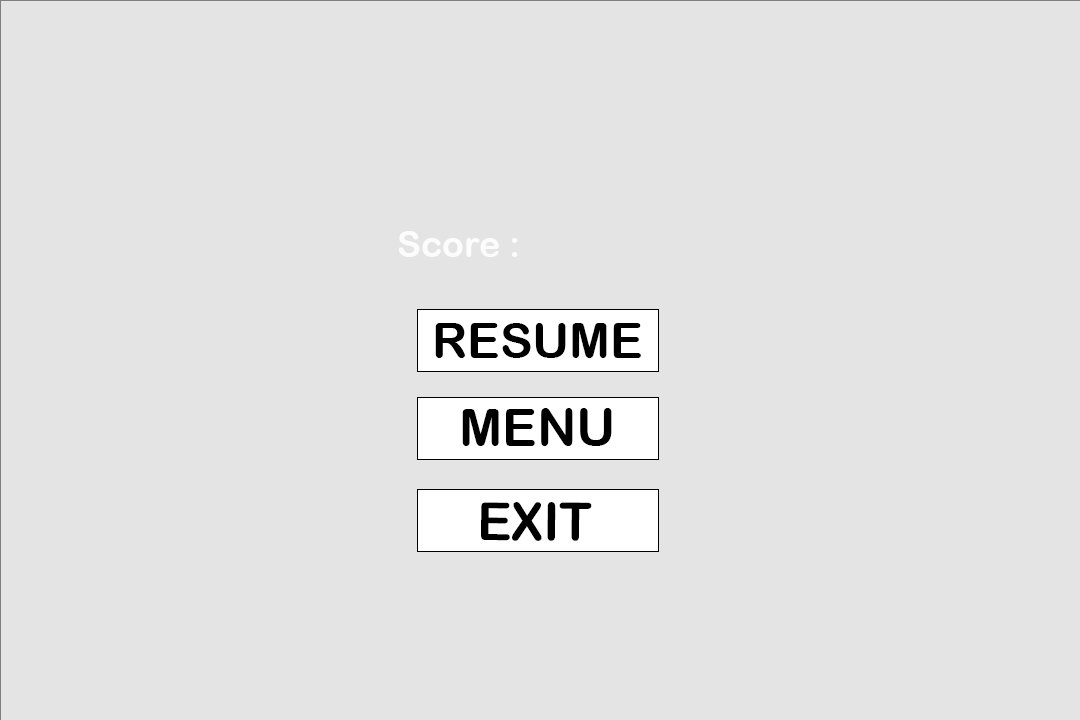
<style>
.page{position:relative;width:1080px;height:720px;background:#e4e4e4}
.page>*{position:absolute;margin:0}
.t1{font:36px "ArialRoundedMTBold";color:#fcfcfc}
.t2{font:48.9px "ArialRoundedMTBold";color:#000000}
.t3{font:51.9px "ArialRoundedMTBold";color:#000000}
.t4{font:52.3px "ArialRoundedMTBold";color:#000000}
</style>
<div class="page">
<p class="t1" style="left:398px;top:231px;width:120px;height:26px">Score :</p>
<p class="t2" style="left:435px;top:323px;width:206px;height:35px">RESUME</p>
<p class="t3" style="left:462px;top:408px;width:150px;height:38px">MENU</p>
<p class="t4" style="left:481px;top:502px;width:111px;height:39px">EXIT</p>
</div>
